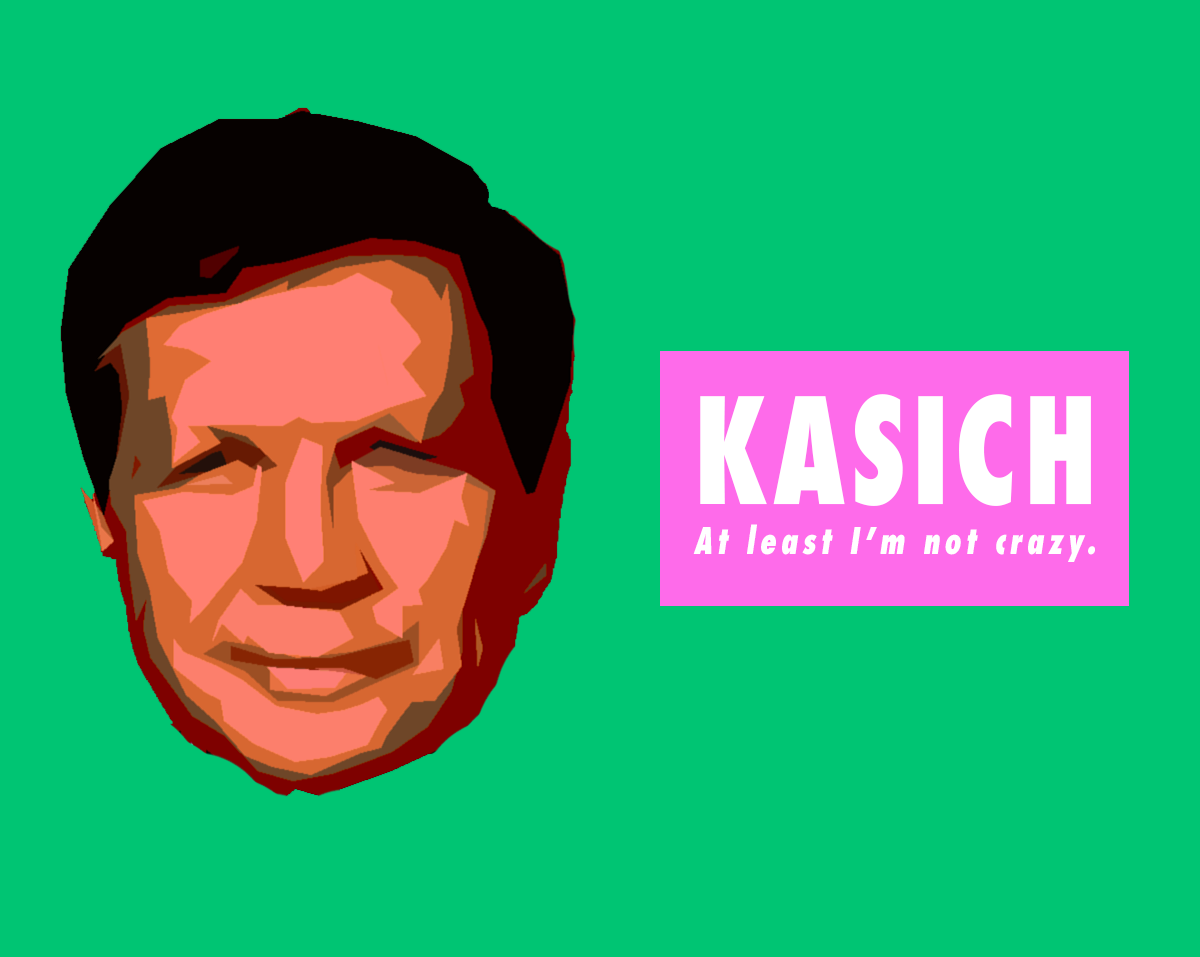
<style>
.page{position:relative;width:1200px;height:957px;background:#00c573}
.page>*{position:absolute;margin:0}
.t1{font:35.7px/50px "Futura-CondensedExtraBold";letter-spacing:0.16em;color:#ffffff;font-style:italic;scale:0.84 1}
.t2{font:142.8px/50px "Futura-CondensedExtraBold";letter-spacing:0.05em;color:#ffffff;scale:0.84 1}
</style>
<div class="page">
<p class="t1" style="left:693px;top:394px;width:402px;height:168px"><span class="t2">KASICH<br></span>At least I’m not crazy.</p>
</div>
